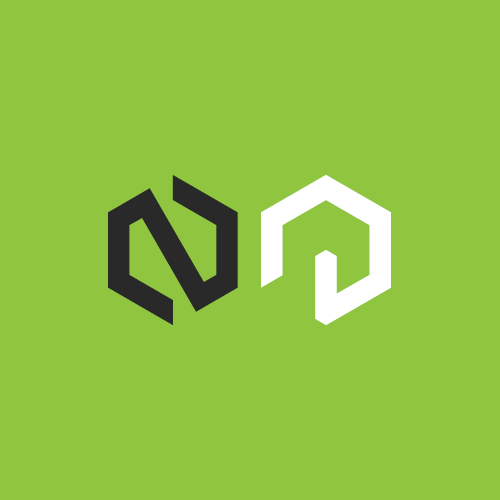
<style>
.page{position:relative;width:500px;height:500px;background:#90c53f}
.page>*{position:absolute;margin:0}
.t1{font:150px "NanoCore-Medium";letter-spacing:0.02em;color:#292929}
.t2{font:150px "NanoCore-Medium";letter-spacing:0.02em;color:#ffffff}
</style>
<div class="page">
<p class="t1" style="left:108px;top:175px;width:283px;height:150px">N<span class="t2">P</span></p>
</div>
